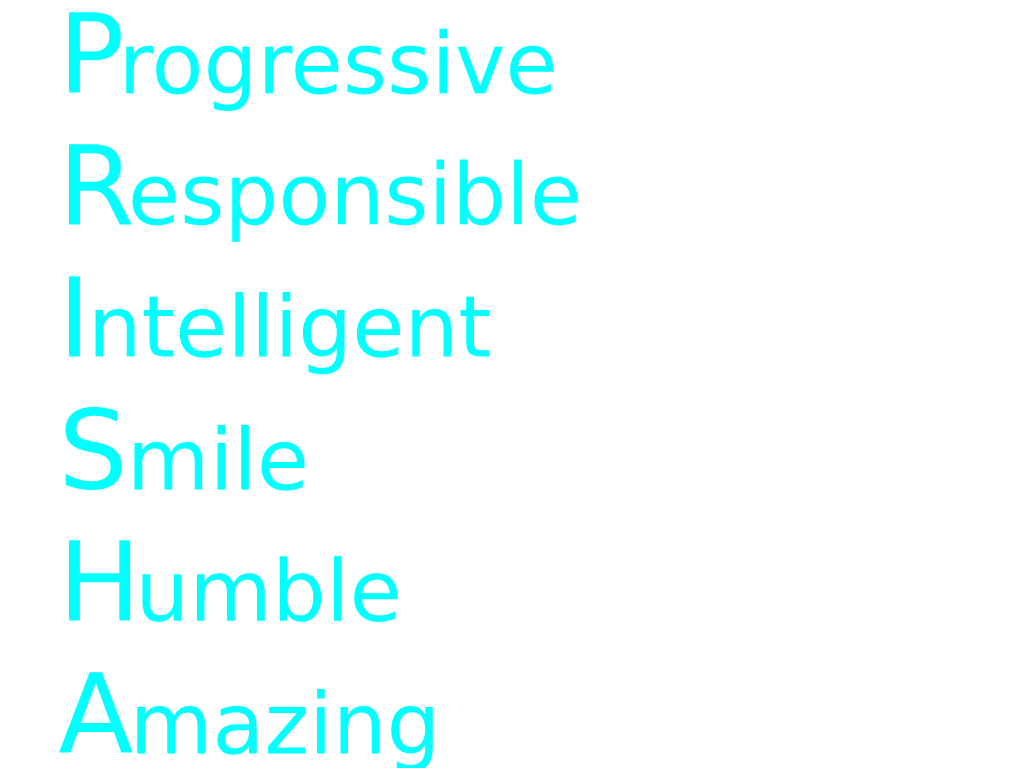
<style>
.page{position:relative;width:1024px;height:768px;background:#ffffff}
.page>*{position:absolute;margin:0}
.t1{font:110px "DejaVuSans";color:#00ffff}
.t2{font:85px "DejaVuSans";color:#00ffff}
</style>
<div class="page">
<p class="t1" style="left:59px;top:12px;width:74px;height:741px">P<br>R<br>I<br>S<br>H<br>A</p>
<p class="t2" style="left:126px;top:28px;width:428px;height:83px">rogressive</p>
<p class="t2" style="left:132px;top:159px;width:446px;height:83px">esponsible</p>
<p class="t2" style="left:95px;top:291px;width:395px;height:84px">ntelligent</p>
<p class="t2" style="left:134px;top:424px;width:171px;height:67px">mile</p>
<p class="t2" style="left:142px;top:556px;width:256px;height:66px">umble</p>
</div>
